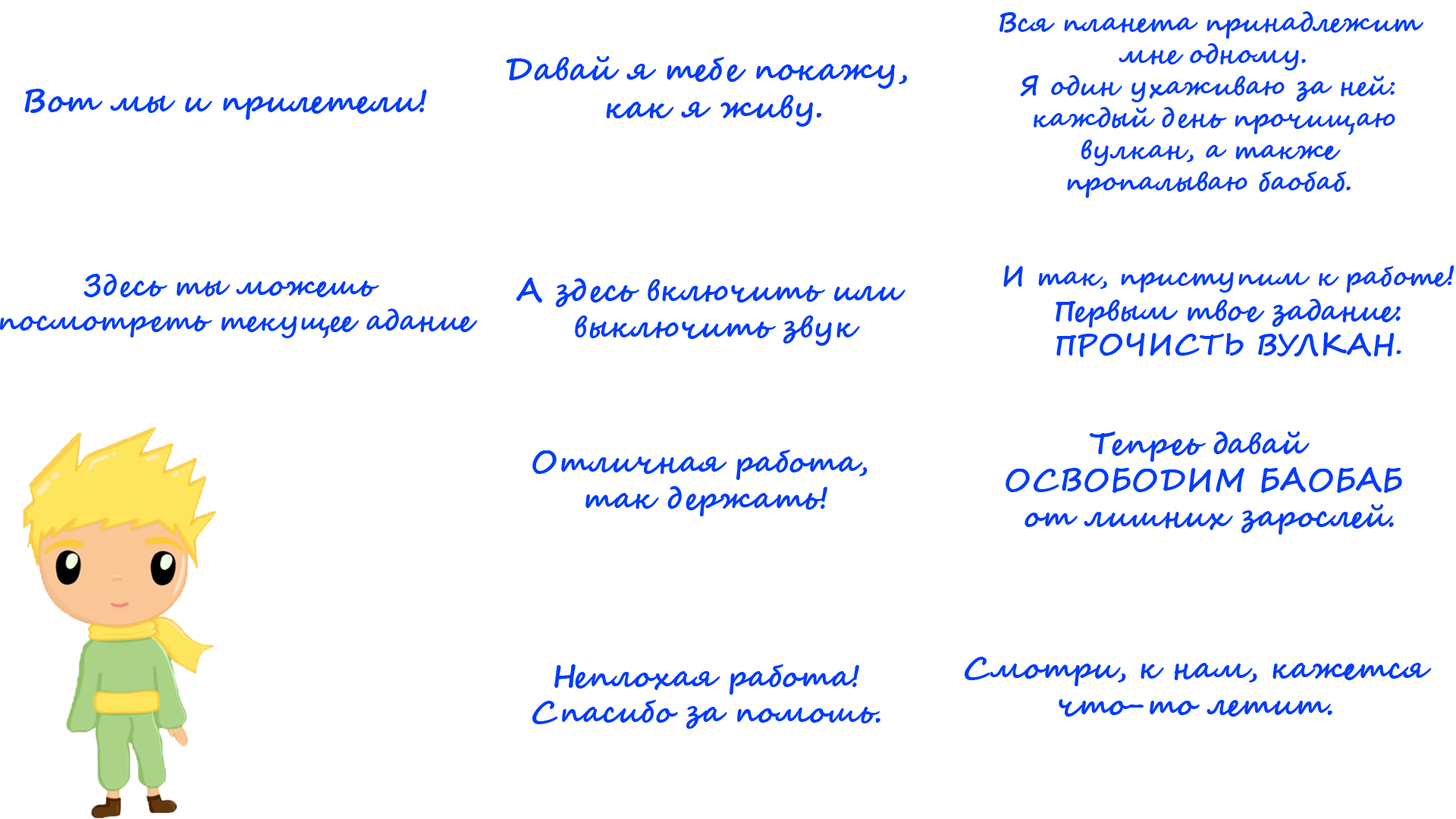
<style>
.page{position:relative;width:1456px;height:819px;background:#ffffff}
.page>*{position:absolute;margin:0}
.t1{font:26.5px "SegoeScript-Bold";color:#013cfc}
.t2{font:31.8px "SegoeScript-Bold";color:#013cfc}
.t3{font:28.8px "SegoeScript-Bold";color:#013cfc}
.t4{font:30.3px "SegoeScript-Bold";color:#013cfc}
</style>
<div class="page">
<p class="t1" style="left:999px;top:11px;width:424px;height:187px;text-align:center">Вся планета принадлежит<br> мне одному.<br>Я один ухаживаю за ней:<br> каждый день прочищаю<br> вулкан, а также <br>пропалываю баобаб.</p>
<p class="t2" style="left:506px;top:56px;width:401px;height:71px;text-align:center">Давай я тебе покажу, <br>как я живу.</p>
<p class="t2" style="left:24px;top:89px;width:403px;height:31px">Вот мы и прилетели!</p>
<p class="t3" style="left:1003px;top:265px;width:451px;height:92px;text-align:center"><span class="t1">И так, приступим к работе</span>!<br>Первым твое задание:<br>ПРОЧИСТЬ ВУЛКАН.</p>
<p class="t3" style="left:0px;top:274px;width:478px;height:64px;text-align:center">Здесь ты можешь <br>посмотреть текущее адание</p>
<p class="t4" style="left:516px;top:278px;width:389px;height:68px;text-align:center">А здесь включить или <br>выключить звук</p>
<p class="t4" style="left:1006px;top:431px;width:396px;height:104px;text-align:center">Тепреь давай <br>ОСВОБОДИМ БАОБАБ<br> от лишних зарослей.</p>
<p class="t4" style="left:532px;top:450px;width:336px;height:66px;text-align:center">Отличная работа, <br>так держать!</p>
<p class="t4" style="left:532px;top:664px;width:348px;height:65px;text-align:center">Неплохая работа!<br>Спасибо за помошь.</p>
<p class="t4" style="left:965px;top:657px;width:467px;height:60px;text-align:center">Смотри, к нам, кажется<br>что-то летит.</p>
</div>
